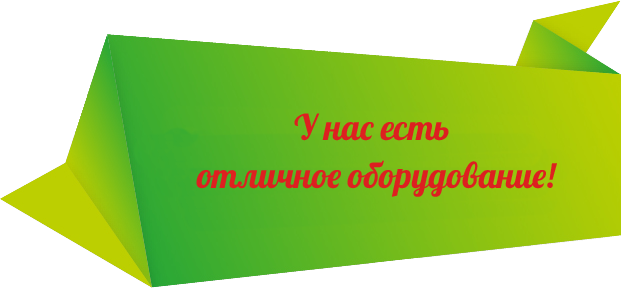
<style>
.page{position:relative;width:621px;height:288px;background:#ffffff}
.page>*{position:absolute;margin:0}
.t1{font:35.4px/47.9px "Lobster";color:#dd2020}
</style>
<div class="page">
<p class="t1" style="left:196px;top:113px;width:361px;height:84px;text-align:center">У нас есть<br> отличное оборудование!</p>
</div>
